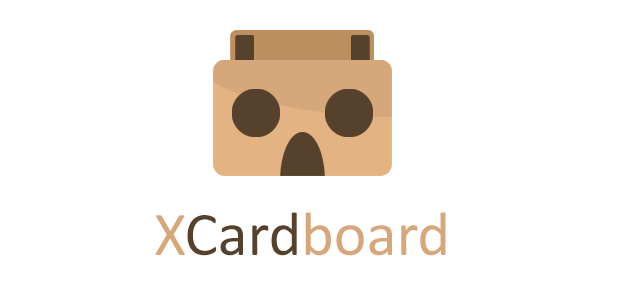
<style>
.page{position:relative;width:620px;height:300px;background:#ffffff}
.page>*{position:absolute;margin:0}
.t1{font:62.3px "Calibri";color:#d6a77a}
.t2{font:62.3px "Calibri";color:#56422c}
</style>
<div class="page">
<p class="t1" style="left:155px;top:212px;width:291px;height:44px">X<span class="t2">Card</span>board</p>
</div>
